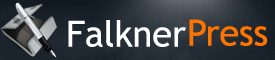
<style>
.page{position:relative;width:275px;height:60px}
.page>*{position:absolute;margin:0}
.t1{font:36px "TrebuchetMS";color:#ffffff}
.t2{font:36px "TrebuchetMS";color:#ff7400}
</style>
<div class="page">
<p class="t1" style="left:68px;top:20px;width:118px;height:27px">Falkner</p>
<p class="t2" style="left:189px;top:19px;width:79px;height:27px">Press</p>
</div>
